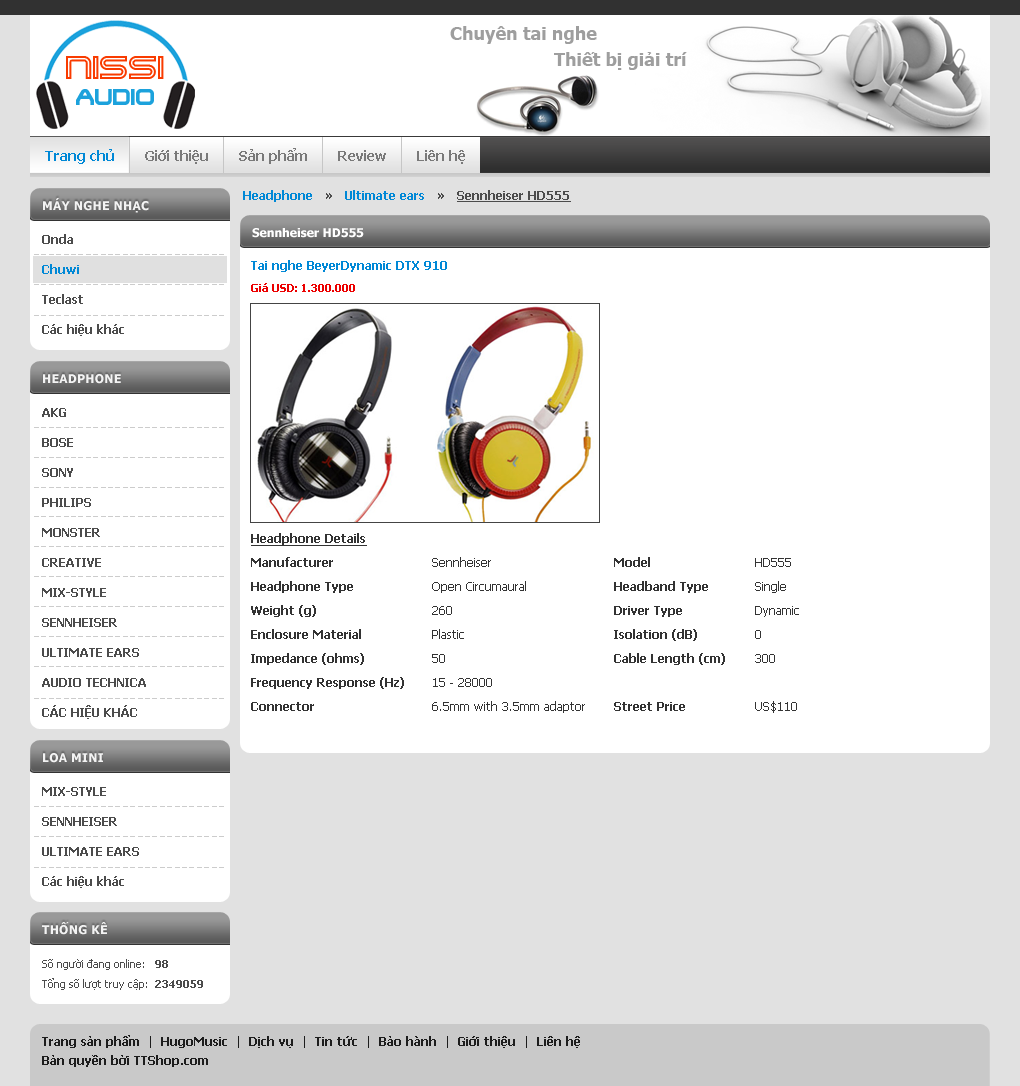
<style>
.page{position:relative;width:1020px;height:1086px;background:#ffffff}
.page>*{position:absolute;margin:0}
.t1{font:18px "Tahoma-Bold";color:#9e9e9e}
.t2{font:36px "TerminatorTwo"}
.t3{font:24px "TerminatorTwo";color:#1ca2dc}
.t4{font:14px "Tahoma-Bold";color:#0088d6}
.t5{font:14px "Tahoma-Bold";color:#797979}
.t6{font:12px "Tahoma-Bold";letter-spacing:0.025em;color:#f3f3f3;text-transform:uppercase}
.t7{font:12px "Tahoma-Bold";color:#4c4c4c;text-decoration:underline}
.t8{font:12px "Tahoma-Bold";color:#0088d6}
.t9{font:12px "Tahoma-Bold";color:#4c4c4c}
.t10{font:12px "Tahoma-Bold";color:#ffffff}
.t11{font:12px/30px "Tahoma-Bold";color:#4c4c4c}
.t12{font:12px/30px "Tahoma-Bold";color:#0088d6}
.t13{font:11px "Tahoma-Bold";color:#ec0000}
.t14{font:12px/24px "Tahoma";color:#333333}
.t15{font:12px/30px "Tahoma-Bold";color:#333333;text-decoration:underline}
.t16{font:12px/24px "Tahoma-Bold";color:#333333}
.t17{font:11px/20px "Tahoma";color:#4c4c4c}
.t18{font:11px/20px "Tahoma-Bold";color:#4c4c4c}
.t19{font:12px "Tahoma-Bold";color:#1d1d1d}
.t20{font:12px "Tahoma";color:#1d1d1d}
</style>
<div class="page">
<p class="t1" style="left:450px;top:26px;width:147px;height:18px">Chuyên tai nghe</p>
<p class="t1" style="left:554px;top:52px;width:133px;height:18px">Thiết bị giải trí</p>
<p class="t2" style="left:66px;top:56px;width:98px;height:23px">Nissi</p>
<p class="t3" style="left:76px;top:89px;width:78px;height:16px">Audio</p>
<p class="t4" style="left:45px;top:149px;width:69px;height:15px">Trang chủ</p>
<p class="t5" style="left:145px;top:150px;width:63px;height:14px">Giới thiệu</p>
<p class="t5" style="left:239px;top:148px;width:68px;height:16px">Sản phẩm</p>
<p class="t5" style="left:338px;top:150px;width:48px;height:11px">Review</p>
<p class="t5" style="left:417px;top:150px;width:48px;height:14px">Liên hệ</p>
<p class="t6" style="left:43px;top:198px;width:106px;height:15px">Máy nghe nhạc</p>
<p class="t7" style="left:243px;top:190px;width:328px;height:12px"><span class="t8">Headphone   </span><span class="t9">»   </span><span class="t8">Ultimate ears   </span><span class="t9">»   </span>Sennheiser HD555</p>
<p class="t10" style="left:252px;top:228px;width:112px;height:10px">Sennheiser HD555</p>
<p class="t11" style="left:42px;top:234px;width:82px;height:102px">Onda<br><span class="t12">Chuwi<br></span>Teclast<br>Các hiệu khác</p>
<p class="t8" style="left:251px;top:260px;width:196px;height:12px">Tai nghe BeyerDynamic DTX 910</p>
<p class="t13" style="left:251px;top:283px;width:104px;height:9px">Giá USD: 1.300.000</p>
<p class="t6" style="left:43px;top:374px;width:78px;height:10px">Headphone</p>
<p class="t11" style="left:42px;top:408px;width:104px;height:311px">AKG<br>BOSE<br>SONY<br>PHILIPS<br>MONSTER<br>CREATIVE<br>MIX-STYLE<br>SENNHEISER<br>ULTIMATE EARS<br>AUDIO TECHNICA<br>CÁC HIỆU KHÁC</p>
<p class="t14" style="left:251px;top:533px;width:548px;height:180px"><span class="t15">Headphone Details<br></span><span class="t16">Manufacturer</span>      Sennheiser           <span class="t16">Model</span>      HD555<br><span class="t16">Headphone Type</span>      Open Circumaural           <span class="t16">Headband Type</span>      Single<br><span class="t16">Weight (g)</span>      260           <span class="t16">Driver Type</span>      Dynamic<br><span class="t16">Enclosure Material</span>      Plastic           <span class="t16">Isolation (dB)</span>      0<br><span class="t16">Impedance (ohms)</span>      50           <span class="t16">Cable Length (cm)</span>      300<br><span class="t16">Frequency Response (Hz)</span>      15 - 28000  <br><span class="t16">Connector</span>      6.5mm with 3.5mm adaptor       <span class="t16">Street Price</span>      US$110</p>
<p class="t6" style="left:43px;top:753px;width:60px;height:10px">Loa mini</p>
<p class="t11" style="left:42px;top:787px;width:97px;height:101px">MIX-STYLE<br>SENNHEISER<br>ULTIMATE EARS<br>Các hiệu khác</p>
<p class="t6" style="left:42px;top:922px;width:65px;height:13px">Thống kê</p>
<p class="t17" style="left:42px;top:959px;width:161px;height:31px">Số người đang online:   <span class="t18">98<br></span>Tổng số lượt truy cập:  <span class="t18">2349059</span></p>
<p class="t19" style="left:42px;top:1035px;width:538px;height:13px">Trang sản phẩm<span class="t20">  |  </span>HugoMusic<span class="t20">  |  </span>Dịch vụ<span class="t20">  |  </span>Tin tức<span class="t20">  |  </span>Bảo hành<span class="t20">  |  </span>Giới thiệu<span class="t20">  |  </span>Liên hệ</p>
<p class="t19" style="left:42px;top:1055px;width:166px;height:12px">Bản quyền bởi TTShop.com</p>
</div>
